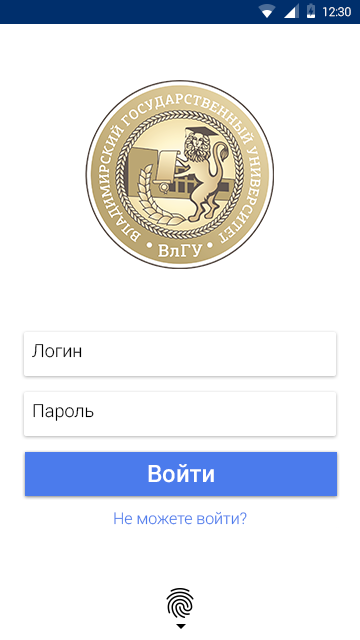
<style>
.page{position:relative;width:360px;height:640px;background:#ffffff}
.page>*{position:absolute;margin:0}
.t1{font:12px "Roboto-Light";color:#ffffff}
.t2{font:18px "Roboto-Light";color:#000000}
.t3{font:24px "Roboto-Medium";color:#ffffff}
.t4{font:16px "Roboto-Light";color:#4b7bec}
</style>
<div class="page">
<p class="t1" style="left:323px;top:7px;width:28px;height:10px">12:30</p>
<p class="t2" style="left:32px;top:344px;width:50px;height:14px">Логин</p>
<p class="t2" style="left:33px;top:404px;width:61px;height:17px">Пароль</p>
<p class="t3" style="left:148px;top:464px;width:66px;height:19px">Войти</p>
<p class="t4" style="left:114px;top:511px;width:133px;height:14px">Не можете войти?</p>
</div>
